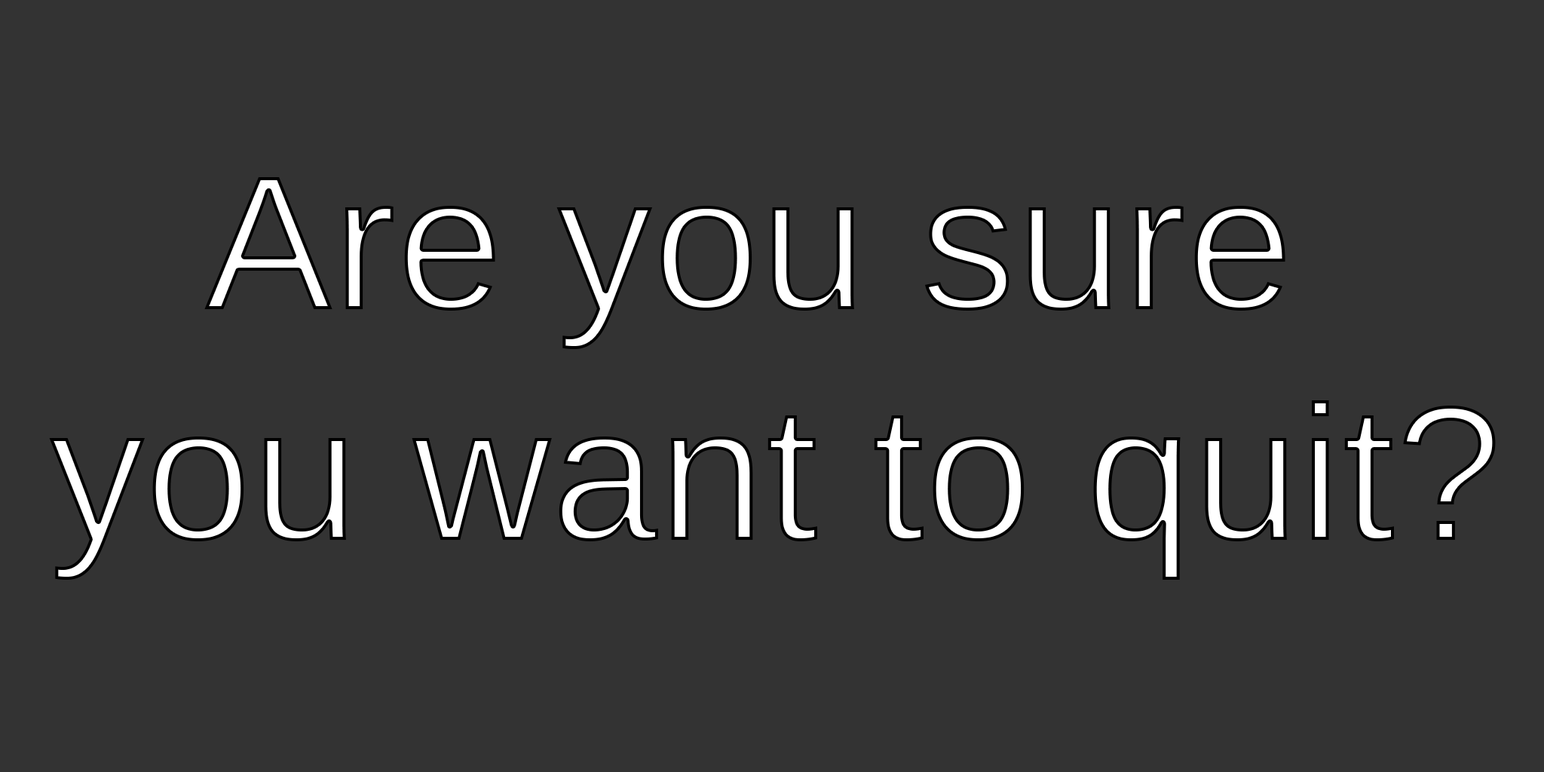
<style>
.page{position:relative;width:1544px;height:772px;background:#333333}
.page>*{position:absolute;margin:0}
.t1{font:192.3px "LiberationSans"}
</style>
<div class="page">
<p class="t1" style="left:49px;top:177px;width:1447px;height:403px;text-align:center">Are you sure <br>you want to quit?</p>
</div>
